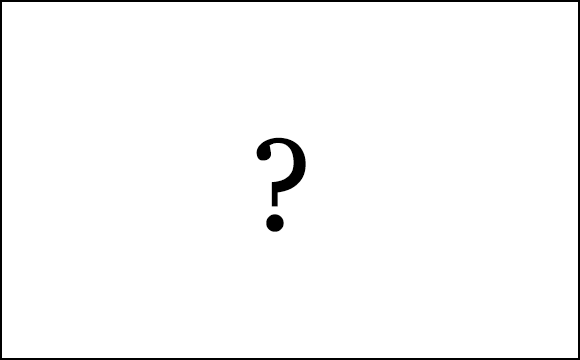
<style>
.page{position:relative;width:580px;height:360px;background:#ffffff}
.page>*{position:absolute;margin:0}
.t1{font:130.5px "Georgia";color:#000000}
</style>
<div class="page">
<p class="t1" style="left:256px;top:137px;width:50px;height:95px">?</p>
</div>
